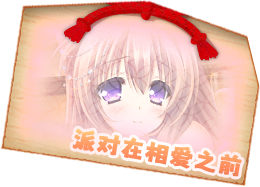
<style>
.page{position:relative;width:260px;height:187px}
.page>*{position:absolute;margin:0}
.t1{font:24px "MaokenAssortedSans";color:#ff9a64;font-weight:bold}
</style>
<div class="page">
<p class="t1" style="left:72px;top:128px;width:170px;height:49px;rotate:10deg">派对在相爱之前</p>
</div>
